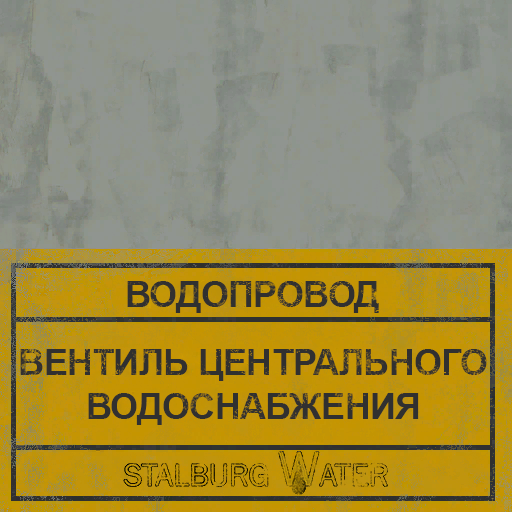
<style>
.page{position:relative;width:512px;height:512px}
.page>*{position:absolute;margin:0}
.t1{font:36px "Arial-BoldMT";letter-spacing:-0.02em;color:#303030}
.t2{font:36px/44px "Arial-BoldMT";letter-spacing:-0.02em;color:#303030}
</style>
<div class="page">
<p class="t1" style="left:127px;top:281px;width:252px;height:32px">ВОДОПРОВОД</p>
<p class="t2" style="left:20px;top:349px;width:467px;height:76px;text-align:center">ВЕНТИЛЬ ЦЕНТРАЛЬНОГО<br>ВОДОСНАБЖЕНИЯ</p>
</div>
